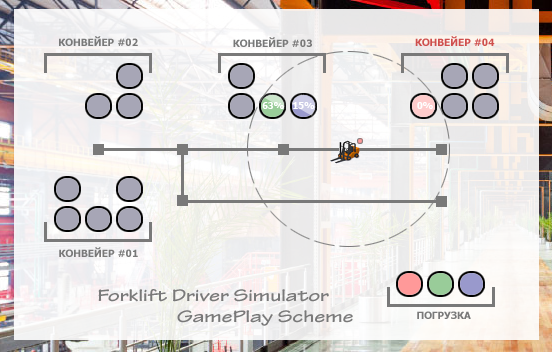
<style>
.page{position:relative;width:552px;height:352px}
.page>*{position:absolute;margin:0}
.t1{font:10px "Tahoma-Bold";color:#797979}
.t2{font:10px "Tahoma-Bold";color:#cf4f4d}
.t3{font:9px "Tahoma-Bold";color:#ffffff}
.t4{font:18px "TektonPro-BoldExt";color:#797979}
</style>
<div class="page">
<p class="t1" style="left:59px;top:36px;width:79px;height:10px">КОНВЕЙЕР #02</p>
<p class="t1" style="left:233px;top:37px;width:79px;height:10px">КОНВЕЙЕР #03</p>
<p class="t2" style="left:415px;top:36px;width:80px;height:10px">КОНВЕЙЕР #04</p>
<p class="t3" style="left:262px;top:102px;width:22px;height:7px">63%</p>
<p class="t3" style="left:293px;top:102px;width:22px;height:7px">15%</p>
<p class="t3" style="left:417px;top:102px;width:16px;height:7px">0%</p>
<p class="t1" style="left:59px;top:247px;width:79px;height:10px">КОНВЕЙЕР #01</p>
<p class="t4" style="left:98px;top:289px;width:255px;height:37px">Forklift Driver Simulator<br>                  GamePlay Scheme</p>
<p class="t1" style="left:417px;top:311px;width:54px;height:8px">ПОГРУЗКА</p>
</div>
